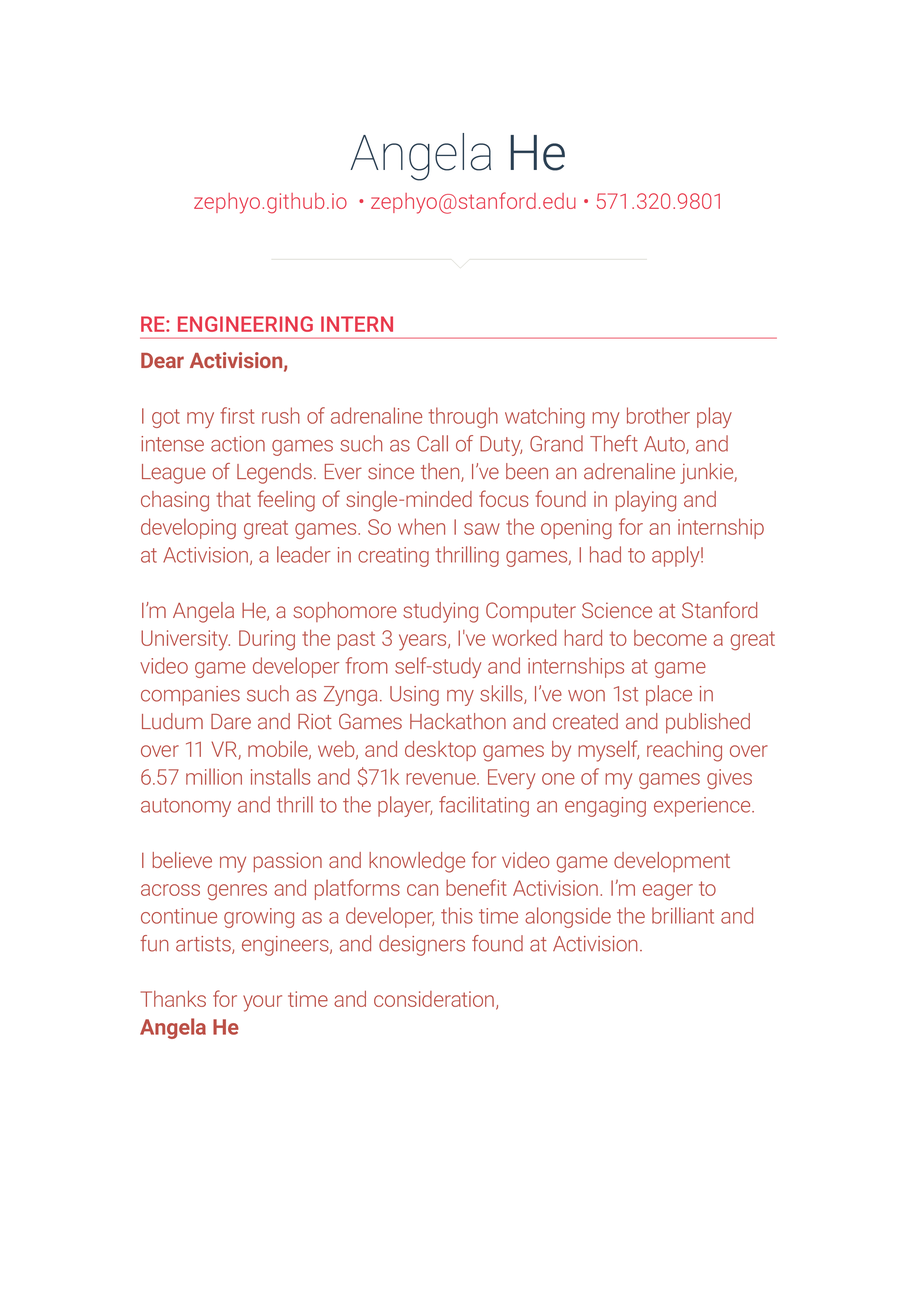
<style>
.page{position:relative;width:918px;height:1299px;background:#ffffff}
.page>*{position:absolute;margin:0}
.t1{font:49.4px "Roboto-Thin";color:#2d4255}
.t2{font:49.4px "Roboto-Light";color:#2d4255}
.t3{font:21.6px "Roboto-Light";color:#e93c4f}
.t4{font:21.6px "Roboto-Medium";color:#e93c4f;text-transform:uppercase}
.t5{font:21.6px/27.8px "Roboto-Light";color:#bc5148}
.t6{font:21.6px/27.8px "Roboto-Bold";color:#bc5148}
</style>
<div class="page">
<p class="t1" style="left:351px;top:133px;width:214px;height:48px">Angela <span class="t2">He</span></p>
<p class="t3" style="left:194px;top:192px;width:526px;height:22px">zephyo.github.io  • zephyo@stanford.edu • 571.320.9801</p>
<p class="t4" style="left:141px;top:316px;width:252px;height:16px">Re: ENGINEERING Intern</p>
<p class="t5" style="left:140px;top:352px;width:635px;height:687px"><span class="t6">Dear Activision,<br><br></span>I got my first rush of adrenaline through watching my brother play intense action games such as Call of Duty, Grand Theft Auto, and League of Legends. Ever since then, I’ve been an adrenaline junkie, chasing that feeling of single-minded focus found in playing and developing great games. So when I saw the opening for an internship at Activision, a leader in creating thrilling games, I had to apply! <br><br>I’m Angela He, a sophomore studying Computer Science at Stanford University. During the past 3 years, I've worked hard to become a great video game developer from self-study and internships at game companies such as Zynga. Using my skills, I’ve won 1st place in Ludum Dare and Riot Games Hackathon and created and published over 11 VR, mobile, web, and desktop games by myself, reaching over 6.57 million installs and $71k revenue. Every one of my games gives autonomy and thrill to the player, facilitating an engaging experience. <br><br>I believe my passion and knowledge for video game development across genres and platforms can benefit Activision. I’m eager to continue growing as a developer, this time alongside the brilliant and fun artists, engineers, and designers found at Activision.<br><br>Thanks for your time and consideration,<br><span class="t6">Angela He</span></p>
</div>
